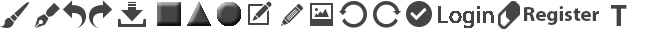
<style>
.page{position:relative;width:660px;height:30px;background:#ffffff}
.page>*{position:absolute;margin:0}
.t1{font:20.9px "MyriadPro-Bold";color:#444444}
.t2{font:30.1px "MyriadPro-Bold";color:#444444}
</style>
<div class="page">
<p class="t1" style="left:524px;top:6px;width:75px;height:19px">Register<br><br>r</p>
<p class="t2" style="left:611px;top:5px;width:16px;height:21px">T</p>
</div>
